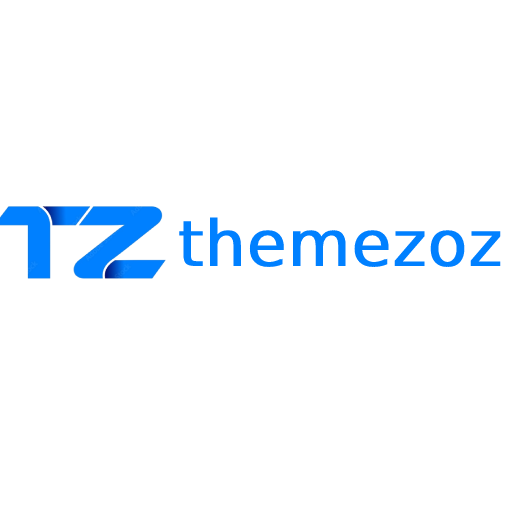
<style>
.page{position:relative;width:512px;height:512px;background:#ffffff}
.page>*{position:absolute;margin:0}
.t1{font:63.7px "DejaVuSans";color:#0080ff;font-weight:bold}
</style>
<div class="page">
<p class="t1" style="left:179px;top:217px;width:322px;height:50px">themezoz</p>
</div>
